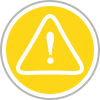
<style>
.page{position:relative;width:100px;height:100px;background:#fcd617}
.page>*{position:absolute;margin:0}
.t1{font:12px/183.3px "KannadaMN-Bold";letter-spacing:-0.01em;color:#ffffff}
</style>
<div class="page">
<p class="t1" style="left:46px;top:31px;width:8px;height:33px;text-align:center">!</p>
</div>
